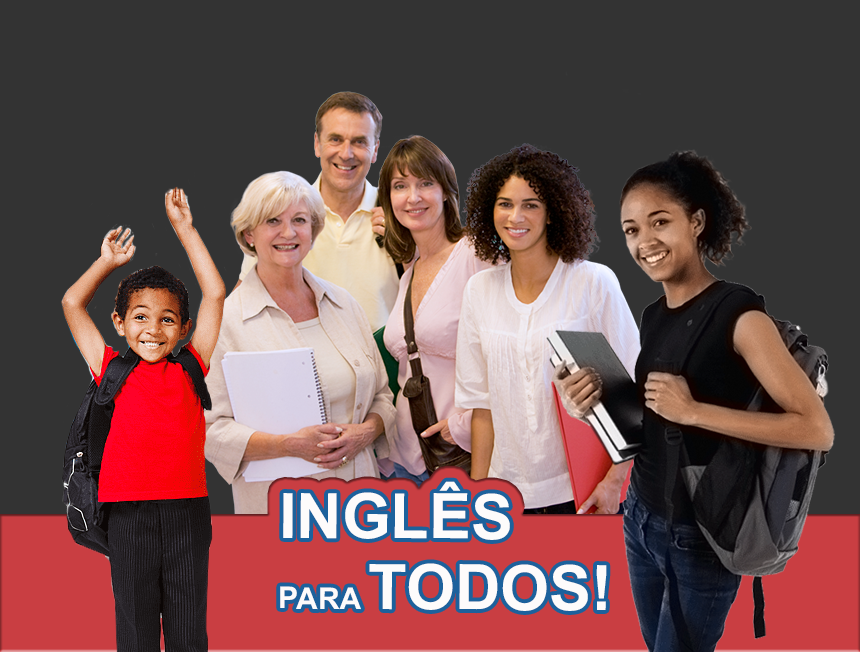
<style>
.page{position:relative;width:860px;height:652px;background:#333333}
.page>*{position:absolute;margin:0}
.t1{font:62.9px/70.9px "Arial-BoldMT";color:#fdfbfb;text-transform:uppercase}
.t2{font:30.1px/70.9px "Arial-BoldMT";color:#fdfbfb;text-transform:uppercase}
</style>
<div class="page">
<p class="t1" style="left:280px;top:481px;width:327px;height:130px">Inglês <br><span class="t2">para </span>Todos!</p>
</div>
